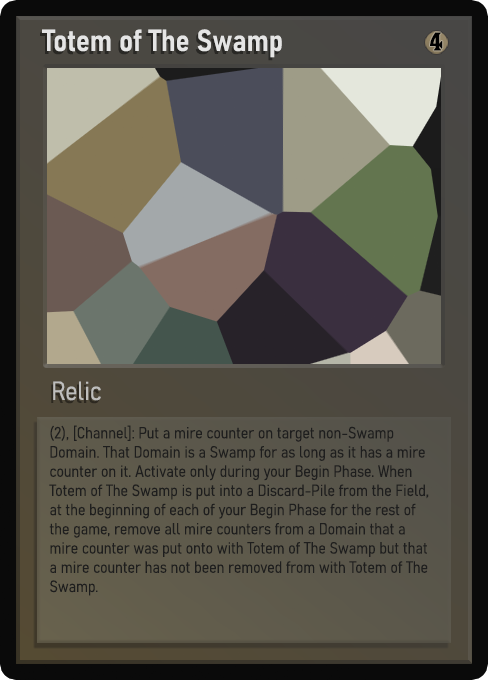
<style>
.page{position:relative;width:488px;height:680px}
.page>*{position:absolute;margin:0}
.t1{font:30px "Bahnschrift-SemiBoldSemiCondensed";color:#f2f2f2;font-weight:bold}
.t2{font:25px "WTRRoycroft";color:#000000;font-weight:bold;scale:1.09 1}
.t3{font:26px "Bahnschrift-LightSemiCondensed";color:#c8c8c8;font-weight:bold}
.t4{font:16px "Bahnschrift-LightSemiCondensed";color:#1e1e1e;font-weight:bold}
</style>
<div class="page">
<p class="t1" style="left:42px;top:29px;width:240px;height:29px;opacity:0.9">Totem of The Swamp</p>
<p class="t2" style="left:430px;top:32px;width:13px;height:19px">4</p>
<p class="t3" style="left:53px;top:381px;width:48px;height:20px;opacity:0.9">Relic</p>
<p class="t4" style="left:49px;top:425px;width:380px;height:171px">(2), [Channel]: Put a mire counter on target non-Swamp Domain. That Domain is a Swamp for as long as it has a mire counter on it. Activate only during your Begin Phase. When Totem of The Swamp is put into a Discard-Pile from the Field, at the beginning of each of your Begin Phase for the rest of the game, remove all mire counters from a Domain that a mire counter was put onto with Totem of The Swamp but that a mire counter has not been removed from with Totem of The Swamp.</p>
</div>
